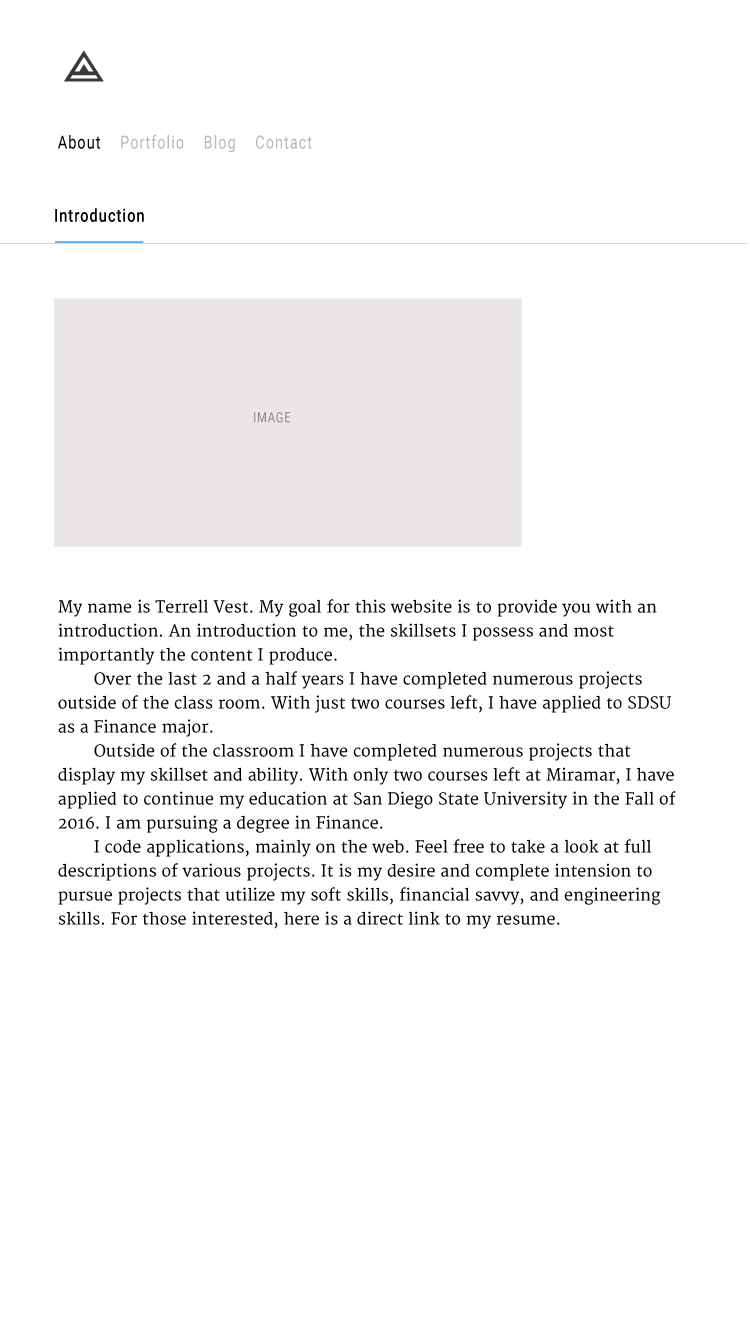
<style>
.page{position:relative;width:750px;height:1334px;background:#ffffff}
.page>*{position:absolute;margin:0}
.t1{font:18px "Roboto-Regular";letter-spacing:0.075em;color:#bbbaba;scale:0.8 1}
.t2{font:18px "Roboto-Regular";letter-spacing:0.075em;color:#000000;scale:0.8 1}
.t3{font:18px "Roboto-Medium";letter-spacing:0.075em;color:#000000;scale:0.8 1}
.t4{font:14px "Roboto-Regular";letter-spacing:0.075em;color:#868686;scale:0.8 1}
.t5{font:16px/24px "Merriweather";color:#000000}
</style>
<div class="page">
<p class="t1" style="left:58px;top:134px;width:254px;height:19px"><span class="t2">About </span>Portfolio Blog Contact</p>
<p class="t3" style="left:55px;top:208px;width:89px;height:14px">Introduction</p>
<p class="t4" style="left:254px;top:412px;width:37px;height:11px">IMAGE</p>
<p class="t5" style="left:58px;top:599px;width:618px;height:330px">My name is Terrell Vest. My goal for this website is to provide you with an introduction. An introduction to me, the skillsets I possess and most importantly the content I produce.<br> Over the last 2 and a half years I have completed numerous projects outside of the class room. With just two courses left, I have applied to SDSU as a Finance major.<br> Outside of the classroom I have completed numerous projects that display my skillset and ability. With only two courses left at Miramar, I have applied to continue my education at San Diego State University in the Fall of 2016. I am pursuing a degree in Finance.<br> I code applications, mainly on the web. Feel free to take a look at full descriptions of various projects. It is my desire and complete intension to pursue projects that utilize my soft skills, financial savvy, and engineering skills. For those interested, here is a direct link to my resume.</p>
</div>
